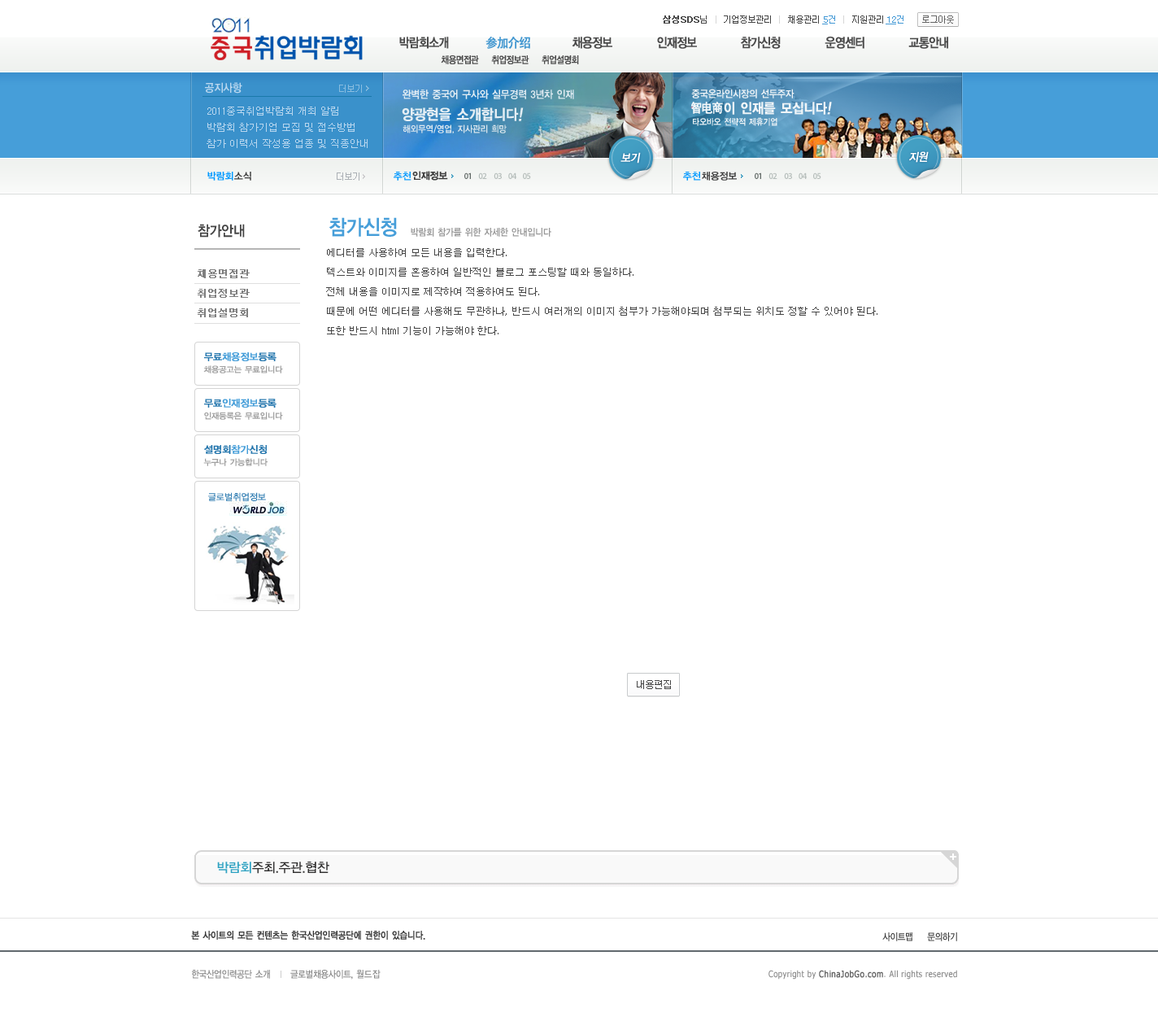
<style>
.page{position:relative;width:1158px;height:1030px;background:#ffffff}
.page>*{position:absolute;margin:0}
.t1{font:8.9px "Dotum";letter-spacing:-0.1em;color:#464646}
.t2{font:8.9px "Dotum";letter-spacing:-0.1em;color:#464646;font-weight:bold}
.t3{font:8.9px "Dotum";letter-spacing:-0.1em;color:#d6d6d6}
.t4{font:8.9px "Dotum";letter-spacing:-0.1em;color:#666666}
.t5{font:8.9px "Dotum";color:#4298d5;text-decoration:underline}
.t6{font:8.9px "Dotum";color:#4298d5}
.t7{font:13px "YDIYGO130-KSCpc-EUC-H";letter-spacing:-0.14em;color:#4a4a4a;font-weight:bold;scale:0.86 1}
.t8{font:13px "SimHei";letter-spacing:-0.08em;color:#3e95cf;font-weight:bold;scale:0.9 1}
.t9{font:9.8px "YDIYGO130-KSCpc-EUC-H";letter-spacing:-0.14em;color:#4a4a4a;font-weight:bold;scale:0.86 1}
.t10{font:11.4px "YDIYGO140-KSCpc-EUC-H";letter-spacing:-0.1em;color:#b9d7ef;scale:0.9 1}
.t11{font:10.7px "YDIYGO140-KSCpc-EUC-H";letter-spacing:-0.1em;color:#e4eef4;scale:0.9 1}
.t12{font:10.1px "YDIYGO140-KSCpc-EUC-H";letter-spacing:-0.1em;color:#f0f5f8;scale:0.9 1}
.t13{font:12.6px "SimHei";letter-spacing:-0.1em;color:#f0f5f8;font-weight:bold;scale:0.9 1}
.t14{font:13.9px "YDIYGO140-KSCpc-EUC-H";letter-spacing:-0.1em;color:#f0f5f8;font-weight:bold;scale:0.9 1}
.t15{font:13.9px "YDIYGO140-KSCpc-EUC-H";letter-spacing:-0.1em;color:#f0f5f8;font-weight:bold;font-style:italic;scale:0.9 1}
.t16{font:9.8px/16.3px "Dotum";color:#b9d7ef}
.t17{font:14.8px "YDIYGO140-KSCpc-EUC-H";letter-spacing:-0.1em;color:#e4eef4;font-weight:bold;scale:0.9 1}
.t18{font:14.8px "YDIYGO140-KSCpc-EUC-H";letter-spacing:-0.1em;color:#e4eef4;font-weight:bold;font-style:italic;scale:0.9 1}
.t19{font:9.4px "YDIYGO140-KSCpc-EUC-H";letter-spacing:-0.1em;color:#dde8ef;scale:0.9 1}
.t20{font:8.9px "YDIYGO140-KSCpc-EUC-H";letter-spacing:-0.1em;color:#f0f5f8;scale:0.9 1}
.t21{font:11.4px "YDIYGO130-KSCpc-EUC-H";letter-spacing:-0.1em;color:#ffffff;font-weight:bold;font-style:italic;scale:0.9 1}
.t22{font:9.8px "YDIYGO140-KSCpc-EUC-H";letter-spacing:-0.1em;color:#0099ff}
.t23{font:9.8px "YDIYGO140-KSCpc-EUC-H";letter-spacing:-0.1em;color:#3e3e3e}
.t24{font:21.1px "YDIYGO140-KSCpc-EUC-H";letter-spacing:-0.1em;color:#469ed9;scale:0.9 1}
.t25{font:14.6px "YDIYGO140-KSCpc-EUC-H";letter-spacing:-0.1em;color:#454545;scale:0.9 1}
.t26{font:9.8px "YDIYGO140-KSCpc-EUC-H";letter-spacing:-0.1em;color:#999999;scale:0.9 1}
.t27{font:9.8px/19.5px "Dotum";color:#454545}
.t28{font:9.8px/19.5px "Dotum";color:#808080;font-weight:bold}
.t29{font:9.8px "YDIYGO130-KSCpc-EUC-H";letter-spacing:-0.1em;color:#469ed9;font-weight:bold}
.t30{font:9.8px "YDIYGO130-KSCpc-EUC-H";letter-spacing:-0.1em;color:#2476ad;font-weight:bold}
.t31{font:8.1px "YDIYGO130-KSCpc-EUC-H";letter-spacing:-0.1em;color:#a1a1a1;font-weight:bold}
.t32{font:8.9px "YDIYGO120-KSCpc-EUC-H";letter-spacing:-0.1em;color:#2f7cb1;font-weight:bold}
.t33{font:13px "YDIYGO130-KSCpc-EUC-H";letter-spacing:-0.1em;color:#323131}
.t34{font:13px "YDIYGO130-KSCpc-EUC-H";letter-spacing:-0.1em;color:#2ea2c2}
.t35{font:9.8px "YDIYGO130-KSCpc-EUC-H";letter-spacing:-0.1em;color:#373737;font-weight:bold;scale:0.86 1}
.t36{font:9.8px "YDIYGO130-KSCpc-EUC-H";letter-spacing:-0.1em;color:#373737;scale:0.86 1}
.t37{font:9.8px "YDIYGO130-KSCpc-EUC-H";letter-spacing:-0.1em;color:#868686;scale:0.86 1}
.t38{font:9.8px "YDIYGO130-KSCpc-EUC-H";letter-spacing:-0.05em;color:#868686;scale:0.86 1}
.t39{font:8.9px "Tahoma";letter-spacing:0.05em;color:#868686;scale:0.86 1}
.t40{font:8.9px "Tahoma";letter-spacing:0.05em;color:#626262;font-weight:bold;scale:0.86 1}
</style>
<div class="page">
<p class="t1" style="left:663px;top:15px;width:291px;height:9px"><span class="t2">삼성SDS</span>님   <span class="t3">| </span>  기업정보관리   <span class="t3">| </span>  채용관리          <span class="t3">|</span>   지원관리                <span class="t4">로그아웃</span></p>
<p class="t5" style="left:822px;top:15px;width:13px;height:9px">5<span class="t6">건</span></p>
<p class="t5" style="left:886px;top:15px;width:18px;height:9px">12<span class="t6">건</span></p>
<p class="t7" style="left:399px;top:37px;width:50px;height:12px">박람회소개</p>
<p class="t8" style="left:486px;top:37px;width:44px;height:12px">参加介绍</p>
<p class="t7" style="left:572px;top:37px;width:40px;height:12px">채용정보</p>
<p class="t7" style="left:657px;top:37px;width:40px;height:12px">인재정보</p>
<p class="t7" style="left:741px;top:37px;width:40px;height:12px">참가신청</p>
<p class="t7" style="left:825px;top:37px;width:40px;height:12px">운영센터</p>
<p class="t7" style="left:908px;top:37px;width:40px;height:12px">교통안내</p>
<p class="t9" style="left:441px;top:55px;width:138px;height:9px">채용면접관    취업정보관    취업설명회</p>
<p class="t10" style="left:205px;top:82px;width:37px;height:12px">공지사항</p>
<p class="t11" style="left:403px;top:89px;width:171px;height:10px">완벽한 중국어 구사와 실무경력 3년차 인재</p>
<p class="t12" style="left:691px;top:89px;width:104px;height:9px">중국온라인시장의 선두주자</p>
<p class="t13" style="left:691px;top:102px;width:32px;height:12px">智电商</p>
<p class="t14" style="left:724px;top:102px;width:108px;height:13px">이 인재를 모십니다<span class="t15">!</span></p>
<p class="t16" style="left:207px;top:107px;width:161px;height:41px">2011중국취업박람회 개최 알림<br>박람회 참가기업 모집 및 접수방법<br>참가 이력서 작성용 업종 및 직종안내</p>
<p class="t17" style="left:402px;top:107px;width:122px;height:14px">양광현을 소개합니다<span class="t18">!</span></p>
<p class="t19" style="left:403px;top:124px;width:104px;height:10px">해외무역/영업, 지사관리 희망</p>
<p class="t20" style="left:693px;top:117px;width:85px;height:9px">타오바오 전략적 제휴기업</p>
<p class="t21" style="left:621px;top:152px;width:20px;height:11px">보기</p>
<p class="t21" style="left:909px;top:151px;width:20px;height:12px">지원</p>
<p class="t22" style="left:207px;top:172px;width:26px;height:9px">박람회</p>
<p class="t23" style="left:234px;top:172px;width:17px;height:9px">소식</p>
<p class="t22" style="left:394px;top:172px;width:18px;height:9px">추천</p>
<p class="t23" style="left:412px;top:171px;width:36px;height:10px">인재정보</p>
<p class="t22" style="left:683px;top:172px;width:18px;height:9px">추천</p>
<p class="t23" style="left:702px;top:172px;width:35px;height:9px">채용정보</p>
<p class="t24" style="left:329px;top:217px;width:68px;height:20px">참가신청</p>
<p class="t25" style="left:198px;top:224px;width:47px;height:13px">참가안내</p>
<p class="t26" style="left:411px;top:228px;width:140px;height:9px">박람회 참가를 위한 자세한 안내입니다</p>
<p class="t27" style="left:326px;top:248px;width:552px;height:87px">에디터를 사용하여 모든 내용을 입력한다.<br>텍스트와 이미지를 혼용하여 일반적인 블로그 포스팅할 때와 동일하다.<br>전체 내용을 이미지로 제작하여 적용하여도 된다.<br>때문에 어떤 에디터를 사용해도 무관하나, 반드시 여러개의 이미지 첨부가 가능해야되며 첨부되는 위치도 정할 수 있어야 된다.<br>또한 반드시 html 기능이 가능해야 한다.</p>
<p class="t28" style="left:198px;top:269px;width:52px;height:48px">채용면접관<br>취업정보관<br>취업설명회</p>
<p class="t29" style="left:204px;top:352px;width:73px;height:9px"><span class="t30">무료</span>채용정보<span class="t30">등록</span></p>
<p class="t31" style="left:203px;top:365px;width:80px;height:8px">채용공고는 무료입니다</p>
<p class="t29" style="left:204px;top:399px;width:73px;height:8px"><span class="t30">무료</span>인재정보<span class="t30">등록</span></p>
<p class="t31" style="left:204px;top:412px;width:79px;height:8px">인재등록은 무료입니다</p>
<p class="t30" style="left:204px;top:445px;width:63px;height:9px">설명회<span class="t29">참가</span>신청</p>
<p class="t31" style="left:203px;top:458px;width:65px;height:8px">누구나 가능합니다</p>
<p class="t32" style="left:208px;top:492px;width:58px;height:9px">글로벌취업정보</p>
<p class="t33" style="left:217px;top:861px;width:112px;height:12px"><span class="t34">박람회</span>주최.주관.협찬</p>
<p class="t35" style="left:191px;top:930px;width:234px;height:9px">본 사이트의 모든 컨텐츠는 한국산업인력공단에 권한이 있습니다.</p>
<p class="t36" style="left:882px;top:932px;width:31px;height:9px">사이트맵</p>
<p class="t36" style="left:927px;top:932px;width:30px;height:9px">문의하기</p>
<p class="t37" style="left:192px;top:969px;width:189px;height:10px">한국산업인력공단 소개      글로벌채용사이트, <span class="t38">월드잡</span></p>
<p class="t39" style="left:769px;top:969px;width:188px;height:10px">Copyright by <span class="t40">ChinaJobGo.com</span>. All rights reserved</p>
</div>
